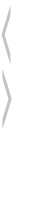
<style>
.page{position:relative;width:30px;height:220px;background:#ffffff}
.page>*{position:absolute;margin:0}
.t1{font:110px "Monaco";color:#c3c3c3;scale:0.15 1}
</style>
<div class="page">
<p class="t1" style="left:1px;top:5px;width:10px;height:60px">&lt;</p>
<p class="t1" style="left:2px;top:69px;width:10px;height:60px">&gt;</p>
</div>
